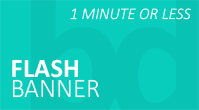
<style>
.page{position:relative;width:199px;height:110px;background:#08c3b3}
.page>*{position:absolute;margin:0}
.t1{font:16.2px "Calibri-LightItalic";color:#ffffff}
.t2{font:26.6px "Calibri-Bold";color:#ffffff}
.t3{font:26.6px "Calibri-Light";color:#ffffff}
</style>
<div class="page">
<p class="t1" style="left:70px;top:8px;width:121px;height:12px">1 MINUTE OR LESS</p>
<p class="t2" style="left:12px;top:59px;width:66px;height:19px">FLASH</p>
<p class="t3" style="left:12px;top:79px;width:87px;height:19px">BANNER</p>
</div>
